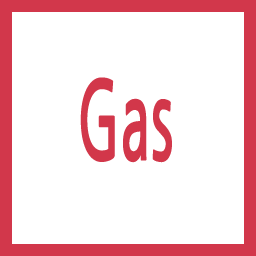
<style>
.page{position:relative;width:256px;height:256px;background:#ffffff}
.page>*{position:absolute;margin:0}
.t1{font:108px "NanumGothicBold";letter-spacing:0.01em;color:#d2374a;scale:0.5 1}
</style>
<div class="page">
<p class="t1" style="left:80px;top:77px;width:92px;height:86px">Gas</p>
</div>
